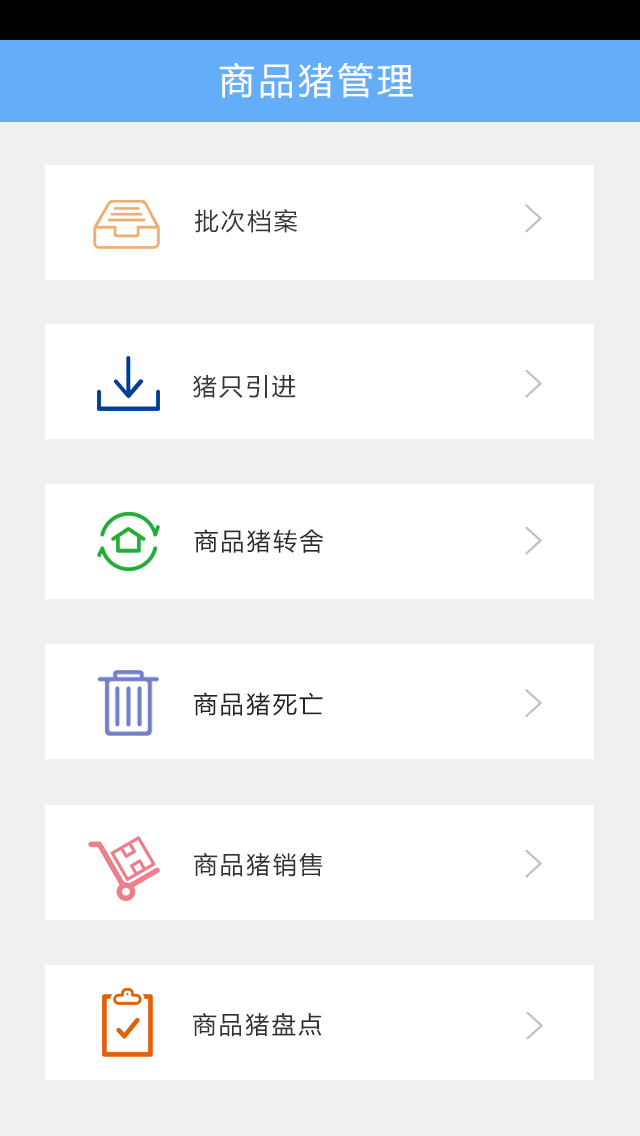
<style>
.page{position:relative;width:640px;height:1136px;background:#ffffff}
.page>*{position:absolute;margin:0}
.t1{font:36px "MicrosoftYaHei";letter-spacing:0.1em;color:#ffffff}
.t2{font:24px "MicrosoftYaHei";letter-spacing:0.1em;color:#373737}
.t3{font:24px "MicrosoftYaHei";letter-spacing:0.1em;color:#383838}
.t4{font:24px "MicrosoftYaHei";letter-spacing:0.1em;color:#2b2b2b}
.t5{font:24px "MicrosoftYaHei";letter-spacing:0.1em;color:#222222}
.t6{font:24px "MicrosoftYaHei";letter-spacing:0.1em;color:#313131}
</style>
<div class="page">
<p class="t1" style="left:219px;top:62px;width:194px;height:36px">商品猪管理</p>
<p class="t2" style="left:195px;top:209px;width:103px;height:24px">批次档案</p>
<p class="t3" style="left:193px;top:374px;width:103px;height:24px">猪只引进</p>
<p class="t4" style="left:194px;top:529px;width:130px;height:24px">商品猪转舍</p>
<p class="t5" style="left:194px;top:692px;width:129px;height:24px">商品猪死亡</p>
<p class="t6" style="left:194px;top:852px;width:129px;height:25px">商品猪销售</p>
<p class="t6" style="left:193px;top:1012px;width:129px;height:25px">商品猪盘点</p>
</div>
